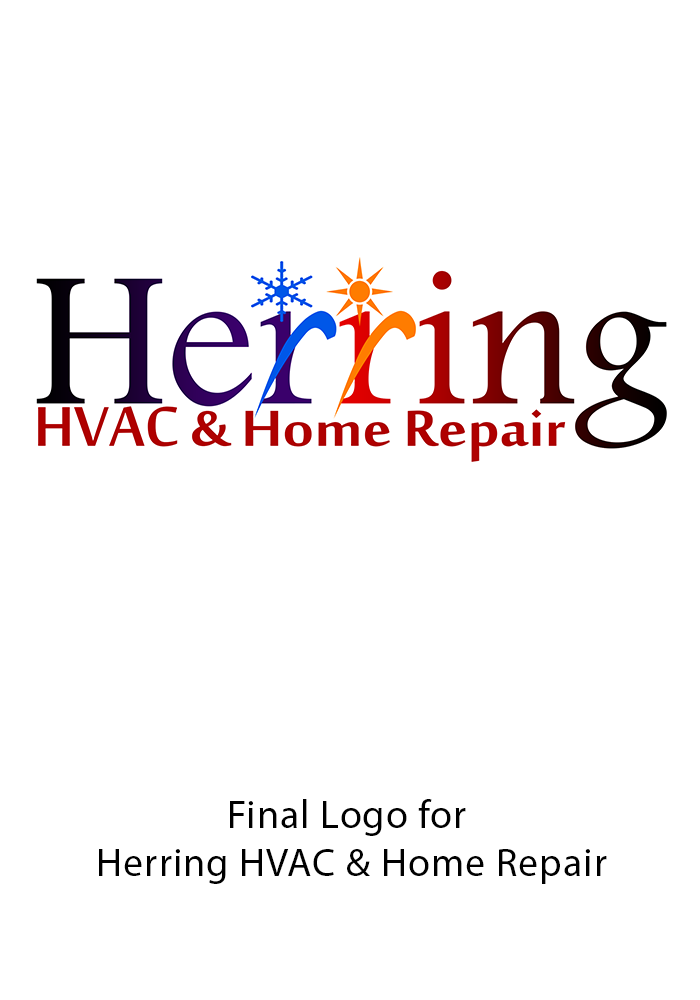
<style>
.page{position:relative;width:700px;height:1000px;background:#ffffff}
.page>*{position:absolute;margin:0}
.t1{font:40px "MyriadPro-Regular";letter-spacing:0.025em;color:#000000}
</style>
<div class="page">
<p class="t1" style="left:99px;top:799px;width:508px;height:85px;text-align:center">Final Logo for <br>Herring HVAC &amp; Home Repair</p>
</div>
